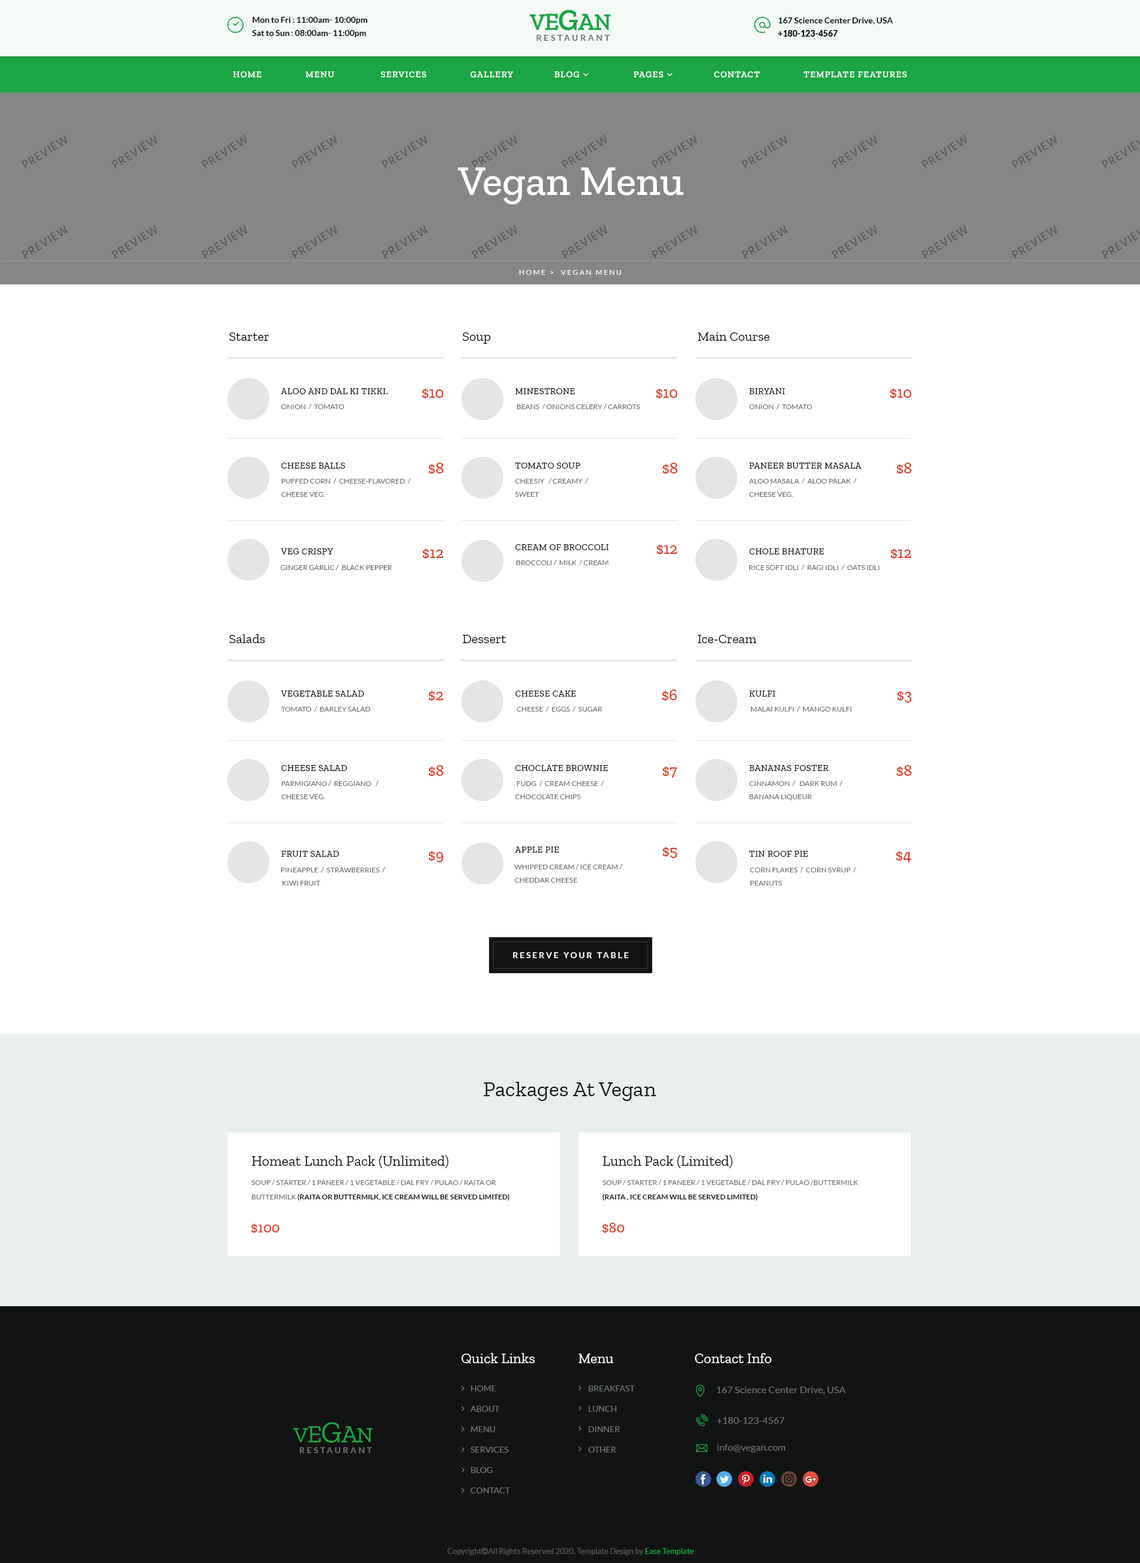
<style>
.page{position:relative;width:1140px;height:1563px;background:#ffffff}
.page>*{position:absolute;margin:0}
.t1{font:8.4px/13.2px "Lato-Bold";color:#121312}
.t2{font:8.4px/13.2px "Lato-Regular";color:#121312}
.t3{font:22.8px "ZillaSlab-SemiBold";letter-spacing:-0.03em;color:#1aa644;text-transform:uppercase}
.t4{font:25.2px "ZillaSlab-SemiBold";letter-spacing:-0.03em;color:#1aa644;text-transform:uppercase}
.t5{font:30px "ZillaSlab-SemiBold";letter-spacing:-0.03em;color:#1aa644;text-transform:uppercase}
.t6{font:8.4px/13.2px "Lato-Black";color:#121312}
.t7{font:8.4px "Lato-Bold";letter-spacing:0.26em;color:#6e726e;text-transform:uppercase}
.t8{font:42px "ZillaSlab-Medium";color:#ffffff}
.t9{font:7.2px "Lato-Regular";letter-spacing:0.2em;color:#ffffff;text-transform:uppercase}
.t10{font:13.2px "ZillaSlab-Regular";color:#121413}
.t11{font:9px "ZillaSlab-Medium";letter-spacing:0.03em;color:#121413;text-transform:uppercase}
.t12{font:15.6px "ZillaSlab-Medium";color:#e03c23;text-transform:uppercase}
.t13{font:7.2px "Lato-Regular";color:#6e726e;text-transform:uppercase}
.t14{font:7.2px/13.2px "Lato-Regular";color:#6e726e;text-transform:uppercase}
.t15{font:8.4px "Lato-Bold";letter-spacing:0.2em;color:#fafdfc;text-transform:uppercase}
.t16{font:21.6px "ZillaSlab-Regular";color:#121413}
.t17{font:14.4px "ZillaSlab-Regular";color:#121413}
.t18{font:7.2px/14.4px "Lato-Regular";color:#6e726e;text-transform:uppercase}
.t19{font:7.2px/14.4px "Lato-Bold";color:#121312;text-transform:uppercase}
.t20{font:14.4px "ZillaSlab-Medium";color:#e03c23}
.t21{font:14.4px "ZillaSlab-Regular";color:#ffffff}
.t22{font:8.4px/20.4px "Lato-Regular";color:#6e726e;text-transform:uppercase}
.t23{font:9.6px "Lato-Regular";color:#6e726e}
.t24{font:22.8px "ZillaSlab-Regular";letter-spacing:-0.03em;color:#1aa644;text-transform:uppercase}
.t25{font:25.2px "ZillaSlab-Regular";letter-spacing:-0.03em;color:#1aa644;text-transform:uppercase}
.t26{font:30px "ZillaSlab-Regular";letter-spacing:-0.03em;color:#1aa644;text-transform:uppercase}
.t27{font:8.4px "Lato-Bold";letter-spacing:0.25em;color:#6e726e;text-transform:uppercase}
</style>
<div class="page">
<p class="t1" style="left:252px;top:17px;width:116px;height:20px">Mon to Fri<span class="t2"> : </span>11:00am- 10:00pm<br>Sat to Sun<span class="t2"> : </span>08:00am- 11:00pm</p>
<p class="t3" style="left:530px;top:10px;width:81px;height:21px">V<span class="t4">e</span><span class="t5">G</span><span class="t4">a</span>n</p>
<p class="t1" style="left:778px;top:17px;width:115px;height:20px">167 Science Center Drive, USA<br><span class="t6">+180-123-4567</span></p>
<p class="t7" style="left:536px;top:35px;width:74px;height:6px">Restaurant</p>
<p class="t8" style="left:457px;top:167px;width:226px;height:38px">Vegan Menu</p>
<p class="t9" style="left:519px;top:270px;width:102px;height:5px">Home &gt;  Vegan Menu</p>
<p class="t10" style="left:229px;top:332px;width:40px;height:9px">Starter</p>
<p class="t10" style="left:463px;top:332px;width:28px;height:12px">Soup</p>
<p class="t10" style="left:698px;top:332px;width:72px;height:9px">Main Course</p>
<p class="t11" style="left:281px;top:388px;width:107px;height:6px">Aloo and Dal ki Tikki.</p>
<p class="t12" style="left:422px;top:388px;width:21px;height:10px">$10</p>
<p class="t11" style="left:515px;top:388px;width:60px;height:6px">Minestrone</p>
<p class="t12" style="left:656px;top:388px;width:21px;height:10px">$10</p>
<p class="t11" style="left:749px;top:388px;width:36px;height:6px">Biryani</p>
<p class="t12" style="left:890px;top:388px;width:21px;height:10px">$10</p>
<p class="t13" style="left:281px;top:404px;width:63px;height:5px">Onion  /  Tomato</p>
<p class="t13" style="left:517px;top:404px;width:123px;height:5px">beans  / onions celery / carrots</p>
<p class="t13" style="left:749px;top:404px;width:63px;height:5px">Onion  /  Tomato</p>
<p class="t11" style="left:281px;top:463px;width:64px;height:6px">Cheese Balls</p>
<p class="t12" style="left:428px;top:463px;width:15px;height:11px">$8</p>
<p class="t11" style="left:515px;top:463px;width:65px;height:6px">Tomato soup</p>
<p class="t12" style="left:662px;top:463px;width:15px;height:11px">$8</p>
<p class="t11" style="left:749px;top:463px;width:113px;height:6px">Paneer Butter Masala</p>
<p class="t12" style="left:896px;top:463px;width:15px;height:11px">$8</p>
<p class="t14" style="left:281px;top:478px;width:130px;height:19px">puffed corn  /  cheese-flavored  /<br>Cheese Veg.</p>
<p class="t14" style="left:515px;top:478px;width:74px;height:19px">Cheesiy   / Creamy  /  <br>Sweet</p>
<p class="t14" style="left:749px;top:478px;width:108px;height:19px">Aloo Masala  /  Aloo Palak  /<br>Cheese Veg.</p>
<p class="t11" style="left:515px;top:544px;width:94px;height:6px">Cream of broccoli</p>
<p class="t12" style="left:656px;top:544px;width:21px;height:10px">$12</p>
<p class="t11" style="left:281px;top:548px;width:53px;height:6px">Veg Crispy</p>
<p class="t12" style="left:422px;top:548px;width:21px;height:11px">$12</p>
<p class="t11" style="left:749px;top:548px;width:75px;height:6px">Chole Bhature</p>
<p class="t12" style="left:890px;top:548px;width:21px;height:11px">$12</p>
<p class="t13" style="left:280px;top:565px;width:112px;height:5px">Ginger garlic /  Black pepper</p>
<p class="t13" style="left:516px;top:560px;width:92px;height:5px">broccoli /  milk  / cream</p>
<p class="t13" style="left:749px;top:565px;width:131px;height:5px">Rice Soft Idli  /  Ragi idli  /  Oats Idli</p>
<p class="t10" style="left:229px;top:634px;width:36px;height:9px">Salads</p>
<p class="t10" style="left:463px;top:635px;width:43px;height:8px">Dessert</p>
<p class="t10" style="left:698px;top:635px;width:59px;height:8px">Ice-Cream</p>
<p class="t12" style="left:662px;top:689px;width:15px;height:12px">$6</p>
<p class="t11" style="left:281px;top:691px;width:83px;height:6px">Vegetable salad</p>
<p class="t12" style="left:428px;top:691px;width:15px;height:10px">$2</p>
<p class="t11" style="left:515px;top:691px;width:61px;height:6px">Cheese Cake</p>
<p class="t11" style="left:749px;top:691px;width:26px;height:6px">Kulfi</p>
<p class="t12" style="left:897px;top:691px;width:14px;height:12px">$3</p>
<p class="t13" style="left:281px;top:706px;width:89px;height:6px">Tomato  /  Barley Salad</p>
<p class="t13" style="left:517px;top:706px;width:85px;height:6px">cheese  /  eggs  /  sugar</p>
<p class="t13" style="left:751px;top:706px;width:100px;height:6px">malai kulfi  /  mango kulfi</p>
<p class="t11" style="left:281px;top:765px;width:66px;height:6px">Cheese salad</p>
<p class="t12" style="left:428px;top:765px;width:15px;height:11px">$8</p>
<p class="t11" style="left:515px;top:765px;width:93px;height:6px">Choclate brownie</p>
<p class="t12" style="left:662px;top:766px;width:15px;height:12px">$7</p>
<p class="t11" style="left:749px;top:765px;width:80px;height:6px">Bananas Foster</p>
<p class="t12" style="left:896px;top:765px;width:15px;height:11px">$8</p>
<p class="t14" style="left:281px;top:781px;width:98px;height:18px">Parmigiano /  Reggiano   /<br>Cheese Veg.</p>
<p class="t14" style="left:515px;top:781px;width:89px;height:18px">fudg  /  cream cheese  /  <br>chocolate chips</p>
<p class="t14" style="left:749px;top:781px;width:94px;height:19px">cinnamon  /   dark rum  /<br>banana liqueur</p>
<p class="t11" style="left:281px;top:851px;width:58px;height:6px">Fruit salad</p>
<p class="t12" style="left:428px;top:851px;width:15px;height:11px">$9</p>
<p class="t11" style="left:515px;top:847px;width:44px;height:6px">Apple pie</p>
<p class="t12" style="left:662px;top:847px;width:15px;height:11px">$5</p>
<p class="t11" style="left:749px;top:851px;width:59px;height:6px">Tin Roof Pie</p>
<p class="t12" style="left:896px;top:851px;width:15px;height:11px">$4</p>
<p class="t14" style="left:281px;top:867px;width:104px;height:19px">pineapple  /  strawberries  /  <br> kiwi fruit</p>
<p class="t14" style="left:514px;top:864px;width:109px;height:19px">whipped cream / ice cream / <br>cheddar cheese</p>
<p class="t14" style="left:750px;top:867px;width:106px;height:19px">corn flakes  /  corn syrup  /  <br> peanuts</p>
<p class="t15" style="left:513px;top:952px;width:116px;height:6px">Reserve Your Table</p>
<p class="t16" style="left:484px;top:1082px;width:172px;height:19px">Packages At Vegan</p>
<p class="t17" style="left:251px;top:1155px;width:198px;height:13px">Homeat Lunch Pack (Unlimited)</p>
<p class="t17" style="left:602px;top:1155px;width:131px;height:13px">Lunch Pack (Limited)</p>
<p class="t18" style="left:251px;top:1180px;width:258px;height:21px">Soup / Starter / 1 Paneer / 1 Vegetable / Dal Fry / Pulao / Raita or Buttermilk <span class="t19">(Raita or Buttermilk, Ice Cream will be Served Limited)</span></p>
<p class="t18" style="left:602px;top:1180px;width:256px;height:21px">Soup / Starter / 1 Paneer / 1 Vegetable / Dal Fry / Pulao /Buttermilk <br><span class="t19">(Raita , Ice Cream will be Served Limited)</span></p>
<p class="t20" style="left:251px;top:1223px;width:29px;height:10px">$100</p>
<p class="t20" style="left:602px;top:1223px;width:23px;height:10px">$80</p>
<p class="t21" style="left:461px;top:1353px;width:74px;height:11px">Quick Links</p>
<p class="t21" style="left:578px;top:1354px;width:36px;height:9px">Menu</p>
<p class="t21" style="left:695px;top:1353px;width:77px;height:10px">Contact Info</p>
<p class="t22" style="left:470px;top:1385px;width:40px;height:108px">Home<br>About<br>Menu<br>Services<br>Blog<br>Contact</p>
<p class="t22" style="left:588px;top:1385px;width:47px;height:68px">Breakfast<br>Lunch<br>Dinner<br>Other</p>
<p class="t23" style="left:717px;top:1387px;width:129px;height:7px">167 Science Center Drive, USA</p>
<p class="t24" style="left:293px;top:1422px;width:80px;height:21px">V<span class="t25">e</span><span class="t26">G</span><span class="t25">a</span>n</p>
<p class="t23" style="left:717px;top:1417px;width:68px;height:7px">+180-123-4567</p>
<p class="t23" style="left:717px;top:1444px;width:68px;height:9px">info@vegan.com</p>
<p class="t27" style="left:299px;top:1447px;width:73px;height:6px">Restaurant</p>
</div>
